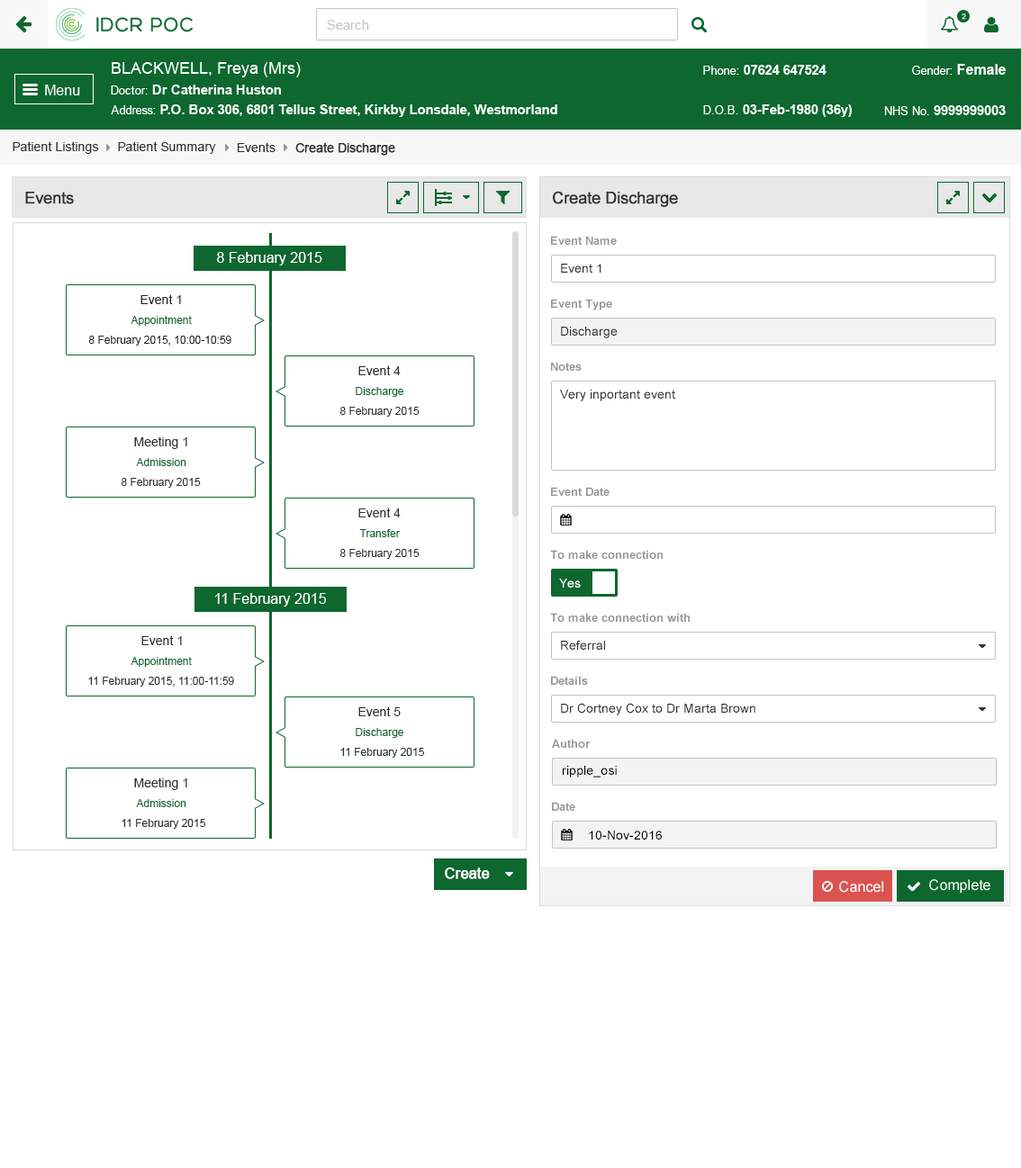
<style>
.page{position:relative;width:1021px;height:1168px;background:#ffffff}
.page>*{position:absolute;margin:0}
.t1{font:12.6px "ArialMT";color:#313131}
.t2{font:12.6px "ArialMT";color:#313131;font-weight:bold}
.t3{font:16.2px "ArialMT";color:#303030;font-weight:bold}
.t4{font:11.7px "Arial-BoldMT";color:#959595}
.t5{font:14.4px "ArialMT";color:#ffffff}
.t6{font:12.6px "ArialMT";color:#303030}
.t7{font:12.6px "ArialMT";color:#242424}
.t8{font:10.8px "ArialMT";color:#0d672f}
.t9{font:10.8px "ArialMT";color:#242424}
.t10{font:10.8px "ArialMT";color:#303030}
.t11{font:12.6px "ArialMT";color:#ffffff}
.t12{font:12.6px "ArialMT";color:#000000}
.t13{font:14.4px "ArialMT";color:#ffffff;font-weight:bold}
</style>
<div class="page">
<p class="t1" style="left:13px;top:141px;width:86px;height:13px">Patient Listings</p>
<p class="t1" style="left:118px;top:141px;width:98px;height:13px">Patient Summary</p>
<p class="t1" style="left:238px;top:142px;width:37px;height:10px">Events</p>
<p class="t2" style="left:295px;top:142px;width:100px;height:14px">Create Discharge</p>
<p class="t3" style="left:25px;top:192px;width:49px;height:12px">Events</p>
<p class="t3" style="left:553px;top:191px;width:125px;height:16px">Create Discharge</p>
<p class="t4" style="left:551px;top:236px;width:66px;height:9px">Event Name</p>
<p class="t5" style="left:217px;top:252px;width:105px;height:14px">8 February 2015</p>
<p class="t6" style="left:561px;top:264px;width:40px;height:9px">Event 1</p>
<p class="t7" style="left:140px;top:294px;width:41px;height:10px">Event 1</p>
<p class="t4" style="left:551px;top:299px;width:61px;height:12px">Event Type</p>
<p class="t8" style="left:131px;top:316px;width:61px;height:10px">Appointment</p>
<p class="t6" style="left:561px;top:327px;width:56px;height:11px">Discharge</p>
<p class="t9" style="left:88px;top:336px;width:143px;height:10px">8 February 2015, 10:00-10:59</p>
<p class="t6" style="left:358px;top:365px;width:43px;height:10px">Event 4</p>
<p class="t4" style="left:551px;top:362px;width:30px;height:9px">Notes</p>
<p class="t8" style="left:356px;top:387px;width:47px;height:10px">Discharge</p>
<p class="t6" style="left:560px;top:390px;width:115px;height:11px">Very inportant event</p>
<p class="t10" style="left:339px;top:407px;width:80px;height:10px">8 February 2015</p>
<p class="t6" style="left:134px;top:437px;width:53px;height:12px">Meeting 1</p>
<p class="t8" style="left:136px;top:458px;width:50px;height:8px">Admission</p>
<p class="t10" style="left:121px;top:478px;width:80px;height:10px">8 February 2015</p>
<p class="t4" style="left:551px;top:487px;width:58px;height:9px">Event Date</p>
<p class="t6" style="left:358px;top:508px;width:43px;height:10px">Event 4</p>
<p class="t8" style="left:359px;top:529px;width:41px;height:8px">Transfer</p>
<p class="t10" style="left:339px;top:549px;width:80px;height:10px">8 February 2015</p>
<p class="t4" style="left:550px;top:550px;width:112px;height:9px">To make connection</p>
<p class="t11" style="left:559px;top:579px;width:22px;height:9px">Yes</p>
<p class="t5" style="left:215px;top:593px;width:111px;height:14px">11 February 2015</p>
<p class="t4" style="left:550px;top:613px;width:139px;height:9px">To make connection with</p>
<p class="t6" style="left:141px;top:635px;width:41px;height:10px">Event 1</p>
<p class="t6" style="left:561px;top:641px;width:44px;height:9px">Referral</p>
<p class="t8" style="left:131px;top:657px;width:61px;height:10px">Appointment</p>
<p class="t10" style="left:88px;top:677px;width:146px;height:10px">11 February 2015, 11:00-11:59</p>
<p class="t4" style="left:551px;top:676px;width:37px;height:9px">Details</p>
<p class="t6" style="left:358px;top:707px;width:43px;height:9px">Event 5</p>
<p class="t6" style="left:561px;top:703px;width:194px;height:13px">Dr Cortney Cox to Dr Marta Brown</p>
<p class="t8" style="left:356px;top:728px;width:47px;height:10px">Discharge</p>
<p class="t10" style="left:340px;top:748px;width:84px;height:10px">11 February 2015</p>
<p class="t4" style="left:552px;top:739px;width:38px;height:9px">Author</p>
<p class="t12" style="left:563px;top:766px;width:54px;height:12px">ripple_osi</p>
<p class="t6" style="left:134px;top:778px;width:53px;height:12px">Meeting 1</p>
<p class="t8" style="left:136px;top:799px;width:50px;height:8px">Admission</p>
<p class="t4" style="left:552px;top:802px;width:23px;height:9px">Date</p>
<p class="t10" style="left:122px;top:819px;width:83px;height:10px">11 February 2015</p>
<p class="t12" style="left:589px;top:831px;width:73px;height:9px">10-Nov-2016</p>
<p class="t13" style="left:445px;top:868px;width:45px;height:11px">Create</p>
</div>
